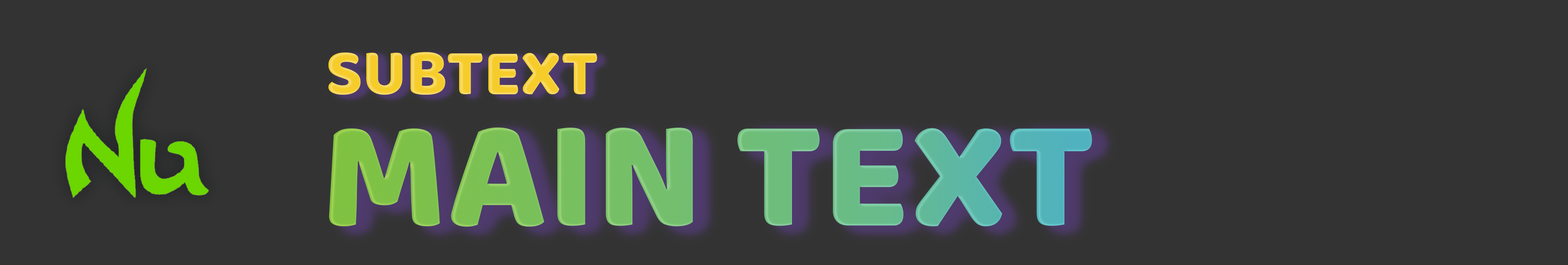
<style>
.page{position:relative;width:1568px;height:265px;background:#333333}
.page>*{position:absolute;margin:0}
.t1{font:66.5px "Baloo-Regular";color:#f5cc29}
.t2{font:158.4px "Baloo-Regular"}
</style>
<div class="page">
<p class="t1" style="left:328px;top:52px;width:269px;height:43px">SUBTEXT</p>
<p class="t2" style="left:329px;top:127px;width:763px;height:100px">MAIN TEXT</p>
</div>
